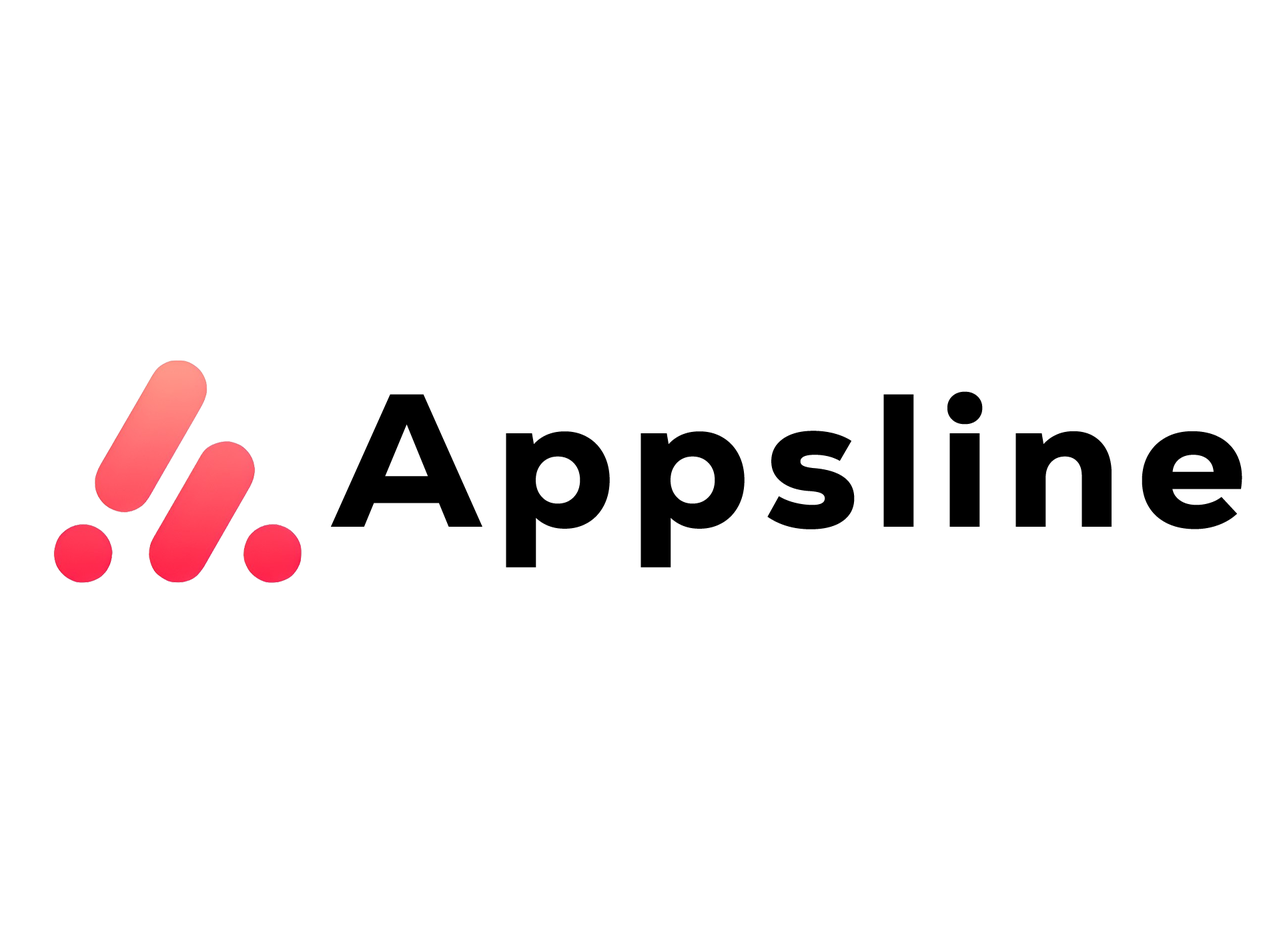
<style>
.page{position:relative;width:1261px;height:946px;background:#ffffff}
.page>*{position:absolute;margin:0}
.t1{font:188.9px "Nexa-Heavy";letter-spacing:0.075em;color:#000000}
</style>
<div class="page">
<p class="t1" style="left:331px;top:391px;width:911px;height:176px">Appsline</p>
</div>
